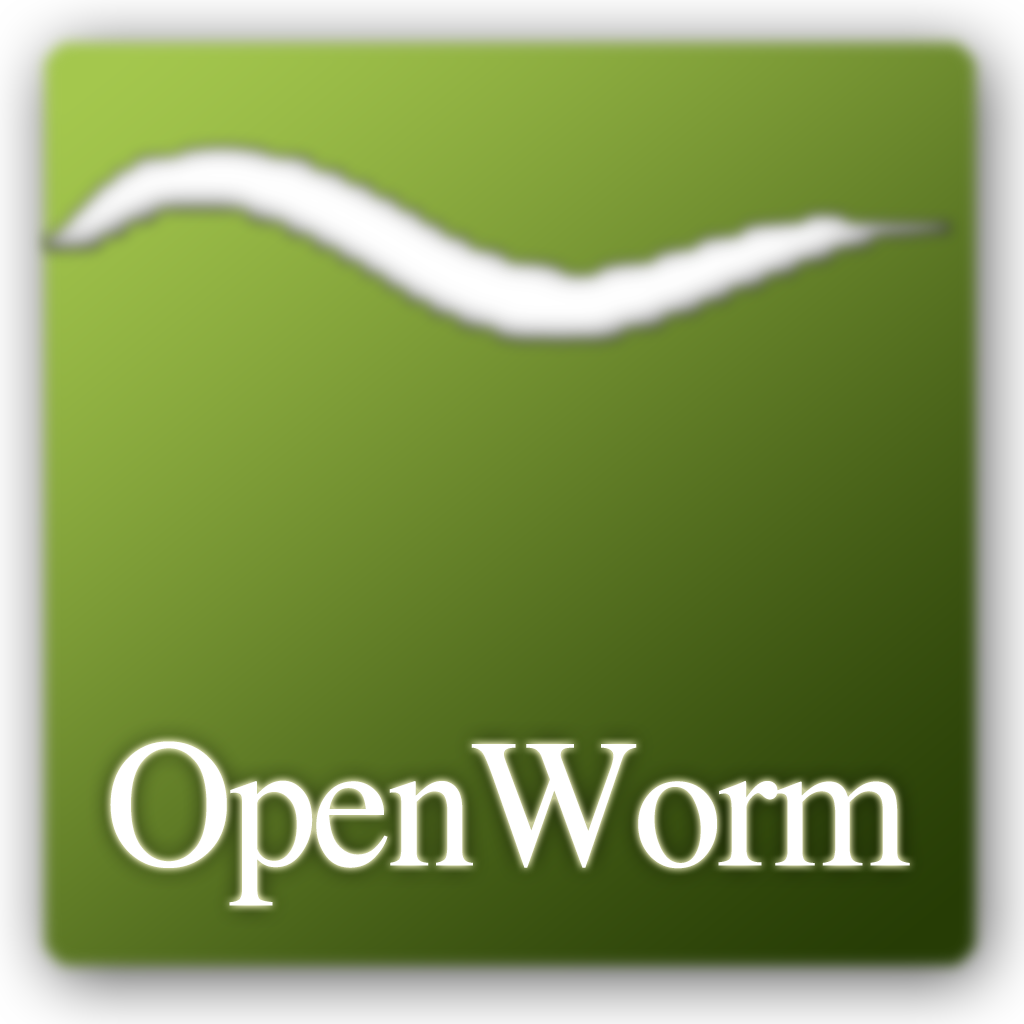
<style>
.page{position:relative;width:1024px;height:1024px}
.page>*{position:absolute;margin:0}
.t1{font:183.3px "Times-Roman";letter-spacing:-0.025em;color:#ffffff;scale:0.97 1}
</style>
<div class="page">
<p class="t1" style="left:110px;top:741px;width:800px;height:165px">OpenWorm</p>
</div>
